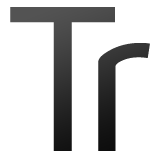
<style>
.page{position:relative;width:159px;height:158px;background:#ffffff}
.page>*{position:absolute;margin:0}
.t1{font:200px "Sommet"}
</style>
<div class="page">
<p class="t1" style="left:10px;top:7px;width:140px;height:144px">Tr</p>
</div>
